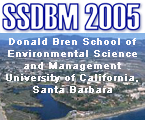
<style>
.page{position:relative;width:145px;height:120px}
.page>*{position:absolute;margin:0}
.t1{font:10px "ArialMT";color:#fbfafc;font-weight:bold}
</style>
<div class="page">
<p class="t1" style="left:6px;top:38px;width:132px;height:55px;text-align:center">Donald Bren School of <br>Environmental Science <br>and Management<br>University of California,<br>Santa Barbara</p>
</div>
